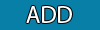
<style>
.page{position:relative;width:100px;height:30px;background:#077fa7}
.page>*{position:absolute;margin:0}
.t1{font:24px "MyriadPro-Regular";color:#ffffff}
</style>
<div class="page">
<p class="t1" style="left:26px;top:6px;width:46px;height:17px">ADD</p>
</div>
